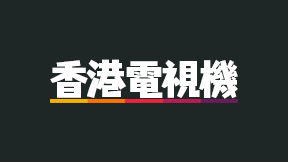
<style>
.page{position:relative;width:288px;height:162px;background:#1e2626}
.page>*{position:absolute;margin:0}
.t1{font:41.9px "KurokaneStd-EB";letter-spacing:-0.1em;color:#ffffff}
</style>
<div class="page">
<p class="t1" style="left:50px;top:59px;width:188px;height:40px">香港電視機</p>
</div>
